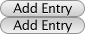
<style>
.page{position:relative;width:85px;height:34px}
.page>*{position:absolute;margin:0}
.t1{font:13px "LucidaGrande";letter-spacing:-0.025em;color:#000000}
</style>
<div class="page">
<p class="t1" style="left:13px;top:2px;width:59px;height:14px">Add Entry</p>
<p class="t1" style="left:13px;top:19px;width:59px;height:14px">Add Entry</p>
</div>
